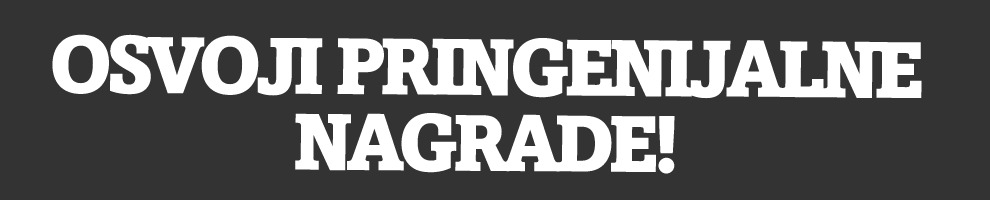
<style>
.page{position:relative;width:990px;height:200px;background:#333333}
.page>*{position:absolute;margin:0}
.t1{font:79.7px/75.9px "AmasisMTStd-Black";letter-spacing:-0.088em;color:#ffffff;text-transform:uppercase}
</style>
<div class="page">
<p class="t1" style="left:52px;top:34px;width:870px;height:140px;text-align:center">osvoji pringenijalne<br>nagrade!</p>
</div>
